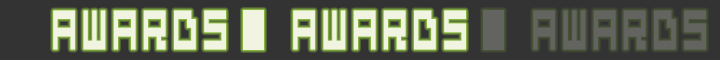
<style>
.page{position:relative;width:720px;height:60px;background:#333333}
.page>*{position:absolute;margin:0}
.t1{font:34.7px "5Computers-In-Love";color:#f1f4e0}
.t2{font:34.7px "5Computers-In-Love";color:#63645f}
</style>
<div class="page">
<p class="t1" style="left:53px;top:10px;width:173px;height:40px">awards</p>
<p class="t1" style="left:293px;top:10px;width:173px;height:40px">awards</p>
<p class="t2" style="left:533px;top:10px;width:173px;height:40px">awards</p>
</div>
